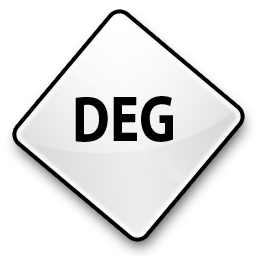
<style>
.page{position:relative;width:256px;height:256px;background:#ffffff}
.page>*{position:absolute;margin:0}
.t1{font:66px "MyriadPro-Bold";letter-spacing:0.005em;color:#010101;scale:0.82 1}
</style>
<div class="page">
<p class="t1" style="left:75px;top:96px;width:98px;height:46px">DEG</p>
</div>
